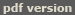
<style>
.page{position:relative;width:75px;height:15px;background:#5a5a5a}
.page>*{position:absolute;margin:0}
.t1{font:11px "Verdana-Bold";color:#dedbcb}
</style>
<div class="page">
<p class="t1" style="left:3px;top:3px;width:69px;height:11px">pdf version</p>
</div>
